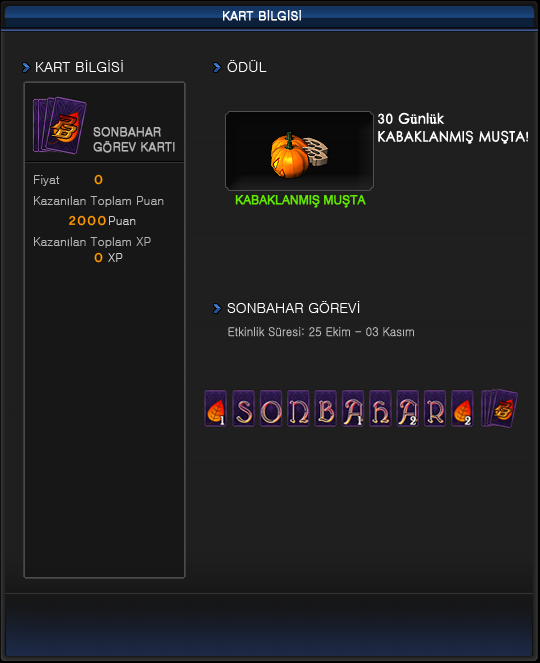
<style>
.page{position:relative;width:540px;height:663px;background:#1f1f1f}
.page>*{position:absolute;margin:0}
.t1{font:12px "Gulim";color:#ffffff;font-weight:bold}
.t2{font:14px "Gulim";color:#ffffff}
.t3{font:14px/18px "LevenimMT";color:#ffffff;font-weight:bold;scale:0.95 1}
.t4{font:14px/18px "AdobeHebrew-Regular";color:#ffffff;font-weight:bold;scale:0.95 1}
.t5{font:14px/18px "Haansoft-Dotum";color:#ffffff;font-weight:bold;scale:0.95 1}
.t6{font:12px/15px "Gulim";color:#b4b4b4;font-weight:bold}
.t7{font:12px "YDIYGO240";color:#ff9900}
.t8{font:12px "Gulim";color:#b4b4b4}
.t9{font:12px "ArialMT";letter-spacing:-0.025em;color:#63e900;font-weight:bold}
.t10{font:12px "YDIYGO240-KSCpc-EUC-H";color:#ff9900}
.t11{font:12px "Gulim";color:#cccccc}
.t12{font:12px "Gulim";color:#bcbcbc;scale:0.95 1}
</style>
<div class="page">
<p class="t1" style="left:223px;top:10px;width:78px;height:11px">KART BİLGİSİ</p>
<p class="t2" style="left:36px;top:60px;width:87px;height:12px">KART BİLGİSİ</p>
<p class="t2" style="left:227px;top:60px;width:40px;height:12px">ÖDÜL</p>
<p class="t3" style="left:378px;top:112px;width:150px;height:32px">30 G<span class="t4">ü</span>nl<span class="t4">ü</span>k <br>KABAKLANMI<span class="t5">Ş</span> MU<span class="t5">Ş</span>TA!</p>
<p class="t6" style="left:93px;top:127px;width:82px;height:26px">SONBAHAR<br>GÖREV KARTI</p>
<p class="t7" style="left:94px;top:174px;width:9px;height:11px">0</p>
<p class="t8" style="left:34px;top:175px;width:26px;height:11px">Fiyat</p>
<p class="t8" style="left:34px;top:196px;width:130px;height:11px">Kazanılan Toplam Puan</p>
<p class="t9" style="left:235px;top:195px;width:131px;height:13px">KABAKLANMIŞ MUŞTA</p>
<p class="t10" style="left:69px;top:215px;width:37px;height:11px">2000</p>
<p class="t11" style="left:109px;top:216px;width:27px;height:9px">Puan</p>
<p class="t8" style="left:34px;top:237px;width:117px;height:11px">Kazanılan Toplam XP</p>
<p class="t7" style="left:94px;top:252px;width:9px;height:11px">0</p>
<p class="t11" style="left:108px;top:253px;width:15px;height:9px">XP</p>
<p class="t2" style="left:227px;top:301px;width:133px;height:12px">SONBAHAR GÖREVİ</p>
<p class="t12" style="left:228px;top:327px;width:186px;height:10px">Etkinlik Süresi: 25 Ekim - 03 Kasım</p>
</div>
